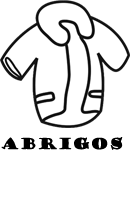
<style>
.page{position:relative;width:130px;height:200px;background:#ffffff}
.page>*{position:absolute;margin:0}
.t1{font:15px "GoudyStout";color:#000000}
</style>
<div class="page">
<p class="t1" style="left:1px;top:137px;width:122px;height:13px">Abrigos</p>
</div>
